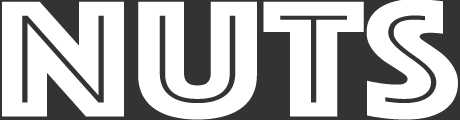
<style>
.page{position:relative;width:460px;height:120px;background:#ffffff}
.page>*{position:absolute;margin:0}
.t1{font:171.8px "Phosphate-Inline";color:#ffffff;scale:1.25 1}
</style>
<div class="page">
<p class="t1" style="left:2px;top:0px;width:456px;height:120px">Nuts</p>
</div>
